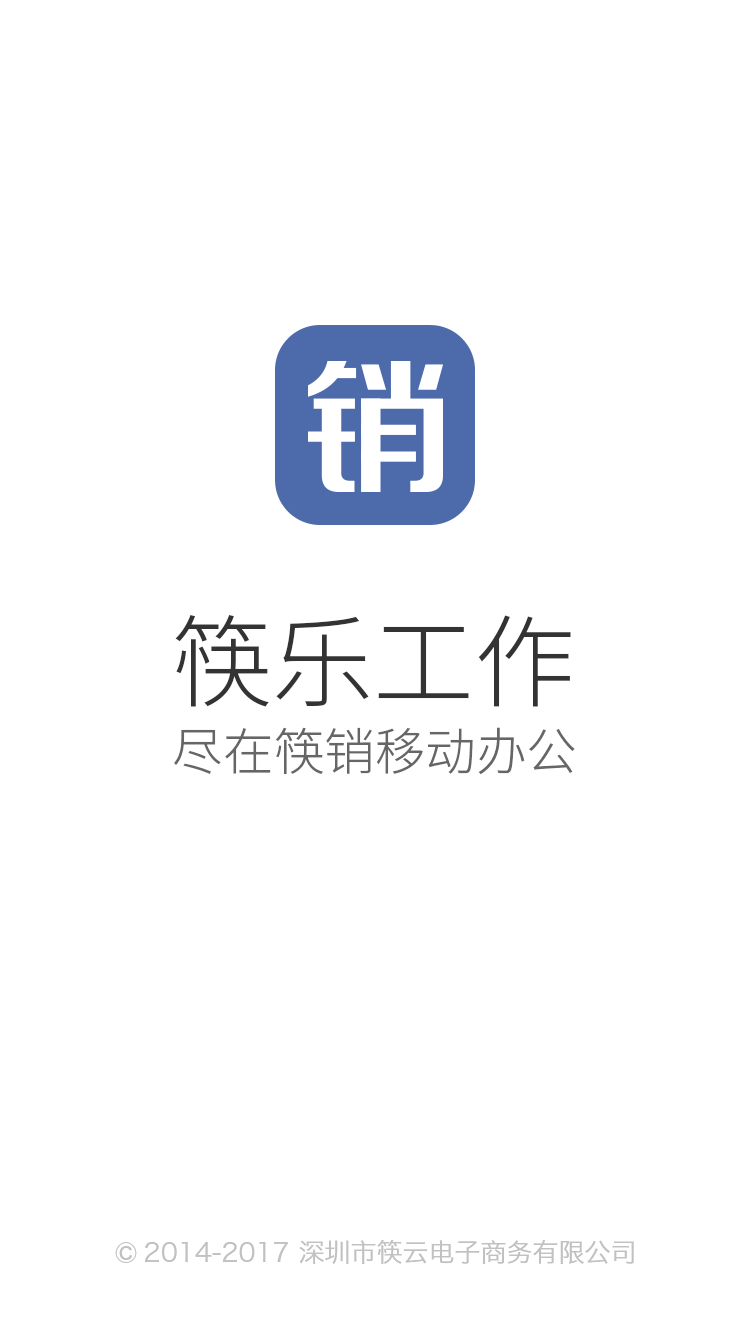
<style>
.page{position:relative;width:750px;height:1334px;background:#ffffff}
.page>*{position:absolute;margin:0}
.t1{font:100.6px "SourceHanSansCN-Light";color:#333333}
.t2{font:50.3px "SourceHanSansCN-Light";color:#666666}
.t3{font:26px "HiraginoSansGB-W3";color:#c1c1c1}
.t4{font:42px "HiraginoSansGB-W3";color:#c1c1c1}
</style>
<div class="page">
<p class="t1" style="left:175px;top:615px;width:396px;height:92px">筷乐工作</p>
<p class="t2" style="left:174px;top:727px;width:401px;height:48px">尽在筷销移动办公</p>
<p class="t3" style="left:144px;top:1239px;width:490px;height:25px">2014-2017 深圳市筷云电子商务有限公司</p>
<p class="t4" style="left:115px;top:1242px;width:22px;height:21px">©</p>
</div>
